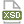
<style>
.page{position:relative;width:24px;height:24px;background:#ffffff}
.page>*{position:absolute;margin:0}
.t1{font:7.5px "ArialMT";letter-spacing:0.01em;color:#ffffff}
</style>
<div class="page">
<p class="t1" style="left:4px;top:12px;width:16px;height:6px">X SD</p>
</div>
